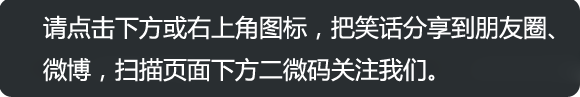
<style>
.page{position:relative;width:580px;height:97px;background:#292e31}
.page>*{position:absolute;margin:0}
.t1{font:24px/42px "MicrosoftYaHei";color:#ffffff}
</style>
<div class="page">
<p class="t1" style="left:43px;top:15px;width:512px;height:67px">请点击下方或右上角图标，把笑话分享到朋友圈、<br>微博，扫描页面下方二微码关注我们。</p>
</div>
